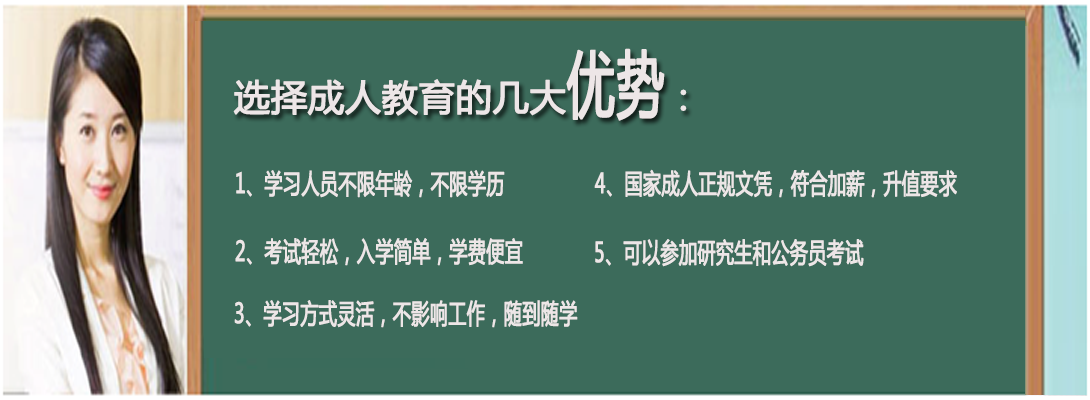
<style>
.page{position:relative;width:1090px;height:400px;background:#3c6b5b}
.page>*{position:absolute;margin:0}
.t1{font:36px "MicrosoftYaHei";color:#ede6e7;font-weight:bold}
.t2{font:72px "MicrosoftYaHei";color:#ede6e7;font-weight:bold;scale:0.67 1}
.t3{font:27px "MicrosoftYaHei";color:#ede6e7;font-weight:bold;scale:0.67 1}
</style>
<div class="page">
<p class="t1" style="left:233px;top:48px;width:454px;height:73px">选择成人教育的几大<span class="t2">优势</span>：</p>
<p class="t3" style="left:236px;top:170px;width:269px;height:28px">1、学习人员不限年龄，不限学历</p>
<p class="t3" style="left:594px;top:169px;width:363px;height:29px">4、国家成人正规文凭，符合加薪，升值要求</p>
<p class="t3" style="left:235px;top:237px;width:288px;height:29px">2、考试轻松，入学简单，学费便宜</p>
<p class="t3" style="left:595px;top:239px;width:269px;height:28px">5、可以参加研究生和公务员考试</p>
<p class="t3" style="left:234px;top:300px;width:344px;height:28px">3、学习方式灵活，不影响工作，随到随学</p>
</div>
